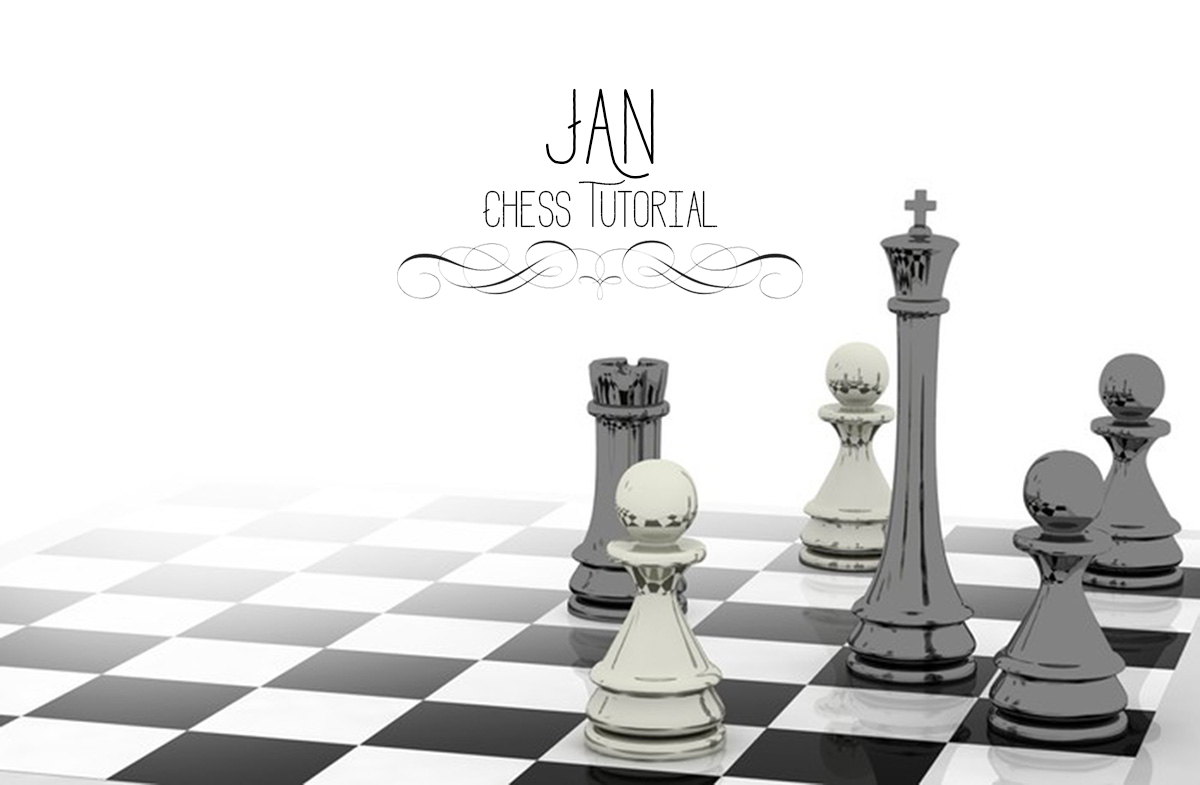
<style>
.page{position:relative;width:1200px;height:785px;background:#ffffff}
.page>*{position:absolute;margin:0}
.t1{font:150px "Adrift";color:#000000}
.t2{font:72px "Adrift";color:#000000}
</style>
<div class="page">
<p class="t1" style="left:546px;top:88px;width:108px;height:91px">JAn</p>
<p class="t2" style="left:483px;top:179px;width:235px;height:49px">Chess Tutorial</p>
</div>
